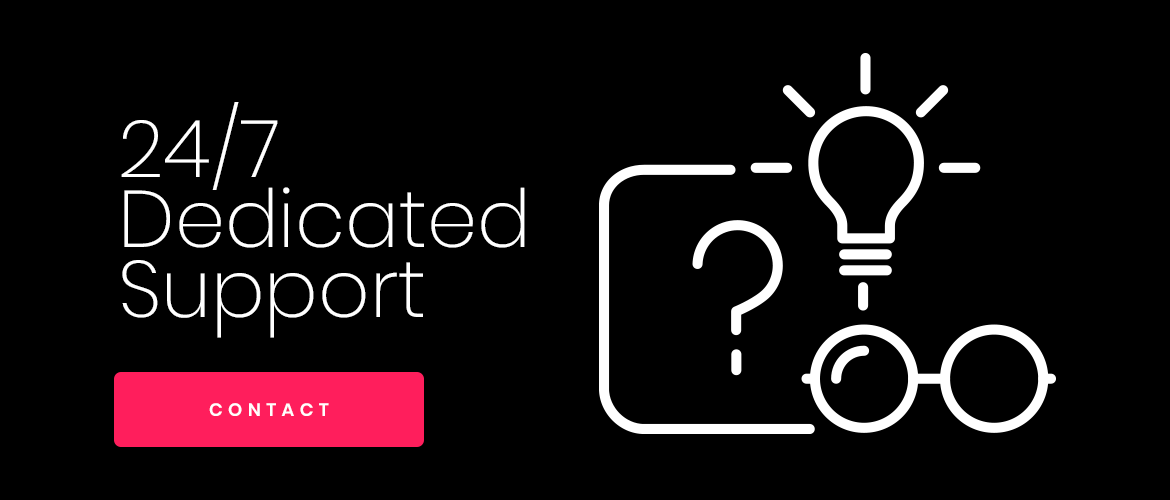
<style>
.page{position:relative;width:1170px;height:500px;background:#000000}
.page>*{position:absolute;margin:0}
.t1{font:80px/70px "Poppins-ExtraLight";color:#ffffff}
.t2{font:18px "Poppins-SemiBold";letter-spacing:0.3em;color:#ffffff}
</style>
<div class="page">
<p class="t1" style="left:121px;top:102px;width:404px;height:236px">24/7<br>Dedicated<br>Support</p>
<p class="t2" style="left:209px;top:403px;width:120px;height:13px">CONTACT</p>
</div>
